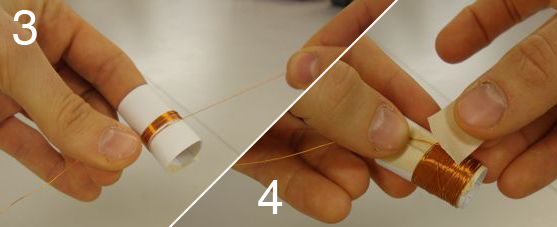
<style>
.page{position:relative;width:557px;height:227px}
.page>*{position:absolute;margin:0}
.t1{font:48px "Helvetica";color:#ffffff}
</style>
<div class="page">
<p class="t1" style="left:13px;top:10px;width:24px;height:35px">3</p>
<p class="t1" style="left:258px;top:180px;width:25px;height:34px">4</p>
</div>
